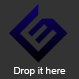
<style>
.page{position:relative;width:79px;height:79px;background:#333333}
.page>*{position:absolute;margin:0}
.t1{font:10px "ArialMT";color:#ffffff}
</style>
<div class="page">
<p class="t1" style="left:14px;top:67px;width:52px;height:9px">Drop it here</p>
</div>
